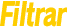
<style>
.page{position:relative;width:68px;height:28px;background:#ffffff}
.page>*{position:absolute;margin:0}
.t1{font:32px "RodinPro-EB";letter-spacing:-0.049em;color:#fecd00;font-style:italic;scale:0.73 1}
</style>
<div class="page">
<p class="t1" style="left:0px;top:1px;width:67px;height:26px">Filtrar</p>
</div>
